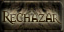
<style>
.page{position:relative;width:64px;height:32px}
.page>*{position:absolute;margin:0}
.t1{font:14px "Morpheus"}
</style>
<div class="page">
<p class="t1" style="left:2px;top:11px;width:60px;height:13px">Rechazar</p>
</div>
